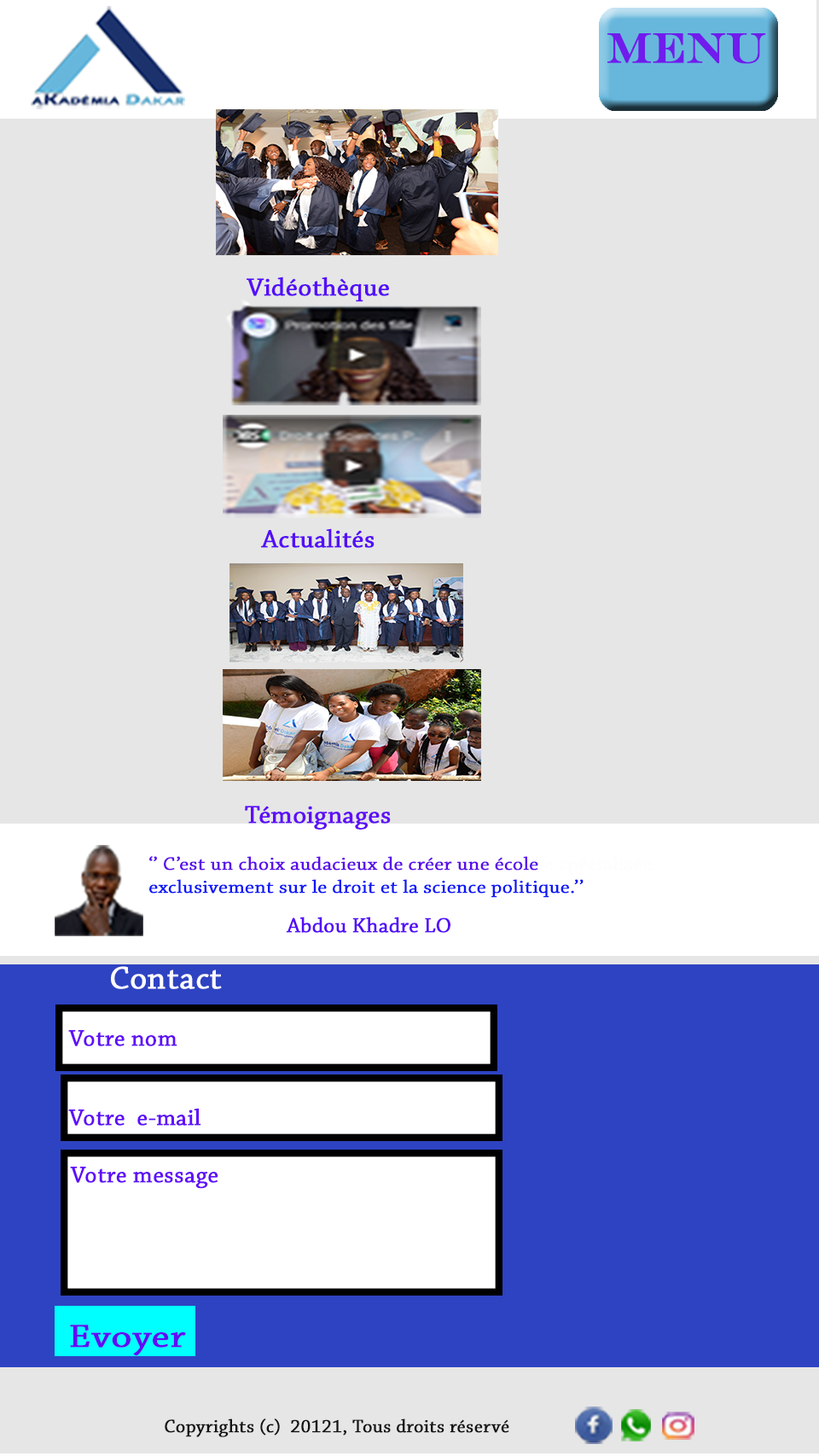
<style>
.page{position:relative;width:819px;height:1456px;background:#e6e6e6}
.page>*{position:absolute;margin:0}
.t1{font:42.6px "EngraversMT";color:#6f1cec;font-weight:bold;scale:0.93 1}
.t2{font:26.1px "ChaparralPro-Regular";color:#540df7;font-weight:bold}
.t3{font:26.1px "ChaparralPro-Regular";color:#5f0df7;font-weight:bold}
.t4{font:19px "ChaparralPro-Regular";color:#0c17f7;font-weight:bold;scale:1.07 1}
.t5{font:19px "ChaparralPro-Regular";color:#5a0cea;font-weight:bold;scale:1.07 1}
.t6{font:19px "ChaparralPro-Regular";color:#fdfdfd;font-weight:bold;scale:1.07 1}
.t7{font:21.3px "ChaparralPro-Regular";color:#540df7;font-weight:bold}
.t8{font:33.2px "ChaparralPro-Regular";color:#fcfbfe;font-weight:bold}
.t9{font:23.7px "ChaparralPro-Regular";color:#5f0df7;font-weight:bold}
.t10{font:33.7px "ChaparralPro-Regular";color:#5f0df7;font-weight:bold;scale:1.18 1}
.t11{font:19px "ChaparralPro-Regular";color:#141313;font-weight:bold}
</style>
<div class="page">
<p class="t1" style="left:608px;top:33px;width:158px;height:31px">MENU</p>
<p class="t2" style="left:247px;top:276px;width:142px;height:26px">Vidéothèque</p>
<p class="t2" style="left:261px;top:528px;width:114px;height:20px">Actualités</p>
<p class="t3" style="left:245px;top:805px;width:146px;height:24px">Témoignages</p>
<p class="t4" style="left:149px;top:856px;width:503px;height:42px"><span class="t5">‘’ C’est un choix audacieux de créer une école</span><span class="t6">le spécialisée <br></span>exclusivement sur le droit et la science politique.’’</p>
<p class="t7" style="left:286px;top:916px;width:165px;height:17px">Abdou Khadre LO</p>
<p class="t8" style="left:111px;top:966px;width:111px;height:23px">Contact</p>
<p class="t9" style="left:68px;top:1030px;width:109px;height:16px">Votre nom</p>
<p class="t9" style="left:68px;top:1108px;width:133px;height:17px">Votre  e-mail</p>
<p class="t9" style="left:70px;top:1166px;width:148px;height:23px">Votre message</p>
<p class="t10" style="left:70px;top:1324px;width:116px;height:32px">Evoyer</p>
<p class="t11" style="left:165px;top:1418px;width:344px;height:19px">Copyrights (c)  20121, Tous droits réservé</p>
</div>
